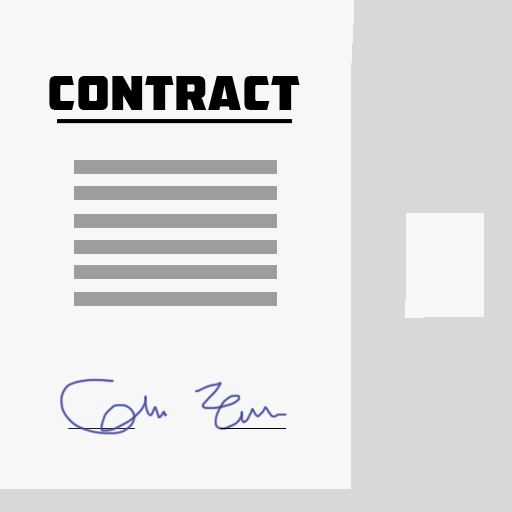
<style>
.page{position:relative;width:512px;height:512px;background:#f7f7f7}
.page>*{position:absolute;margin:0}
.t1{font:46.6px "AMCAPEternal";color:#000000}
</style>
<div class="page">
<p class="t1" style="left:49px;top:76px;width:251px;height:34px">CONTRACT</p>
</div>
